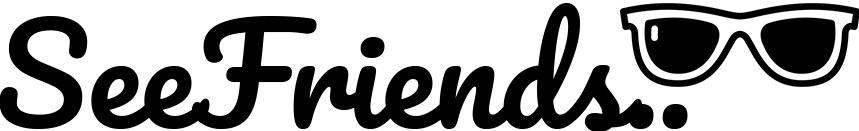
<style>
.page{position:relative;width:859px;height:131px;background:#ffffff}
.page>*{position:absolute;margin:0}
.t1{font:133.3px "Pacifico-Regular";color:#000000}
</style>
<div class="page">
<p class="t1" style="left:0px;top:3px;width:688px;height:129px">SeeFriends..</p>
</div>
